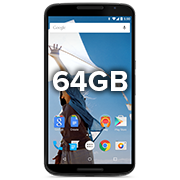
<style>
.page{position:relative;width:180px;height:180px;background:#ffffff}
.page>*{position:absolute;margin:0}
.t1{font:29.7px "ProximaNova-Bold";color:#ffffff}
</style>
<div class="page">
<p class="t1" style="left:53px;top:71px;width:75px;height:20px">64GB</p>
</div>
